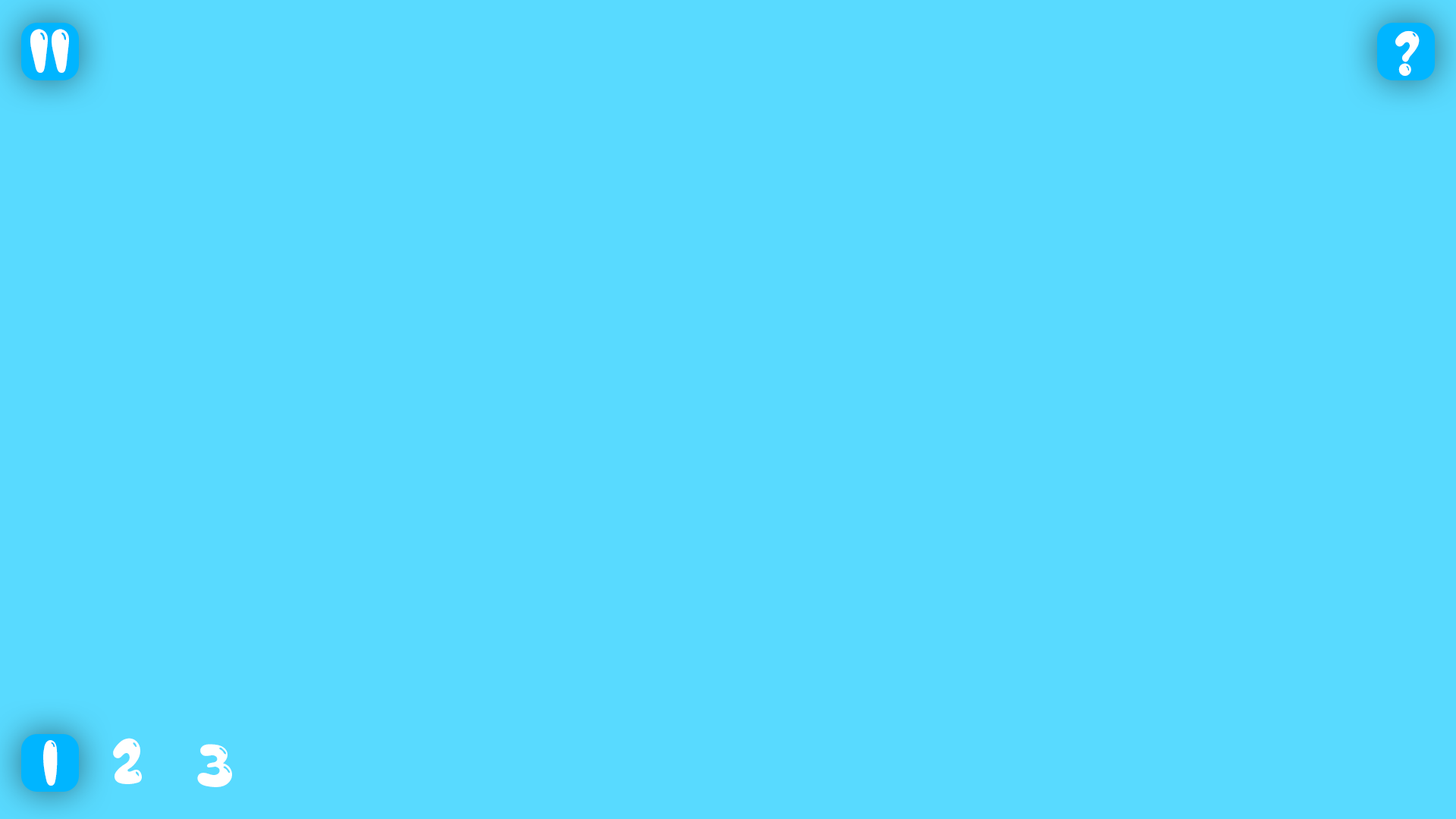
<style>
.page{position:relative;width:1456px;height:819px;background:#58daff}
.page>*{position:absolute;margin:0}
.t1{font:64.2px "aAlloyInk";color:#ffffff;text-transform:uppercase}
.t2{font:56.2px "aAlloyInk";color:#ffffff;text-transform:uppercase}
</style>
<div class="page">
<p class="t1" style="left:30px;top:29px;width:39px;height:44px">ii</p>
<p class="t2" style="left:1395px;top:30px;width:25px;height:46px">?</p>
<p class="t1" style="left:113px;top:738px;width:29px;height:46px">2</p>
<p class="t1" style="left:43px;top:740px;width:15px;height:46px">1</p>
<p class="t1" style="left:197px;top:744px;width:35px;height:43px">3</p>
</div>
